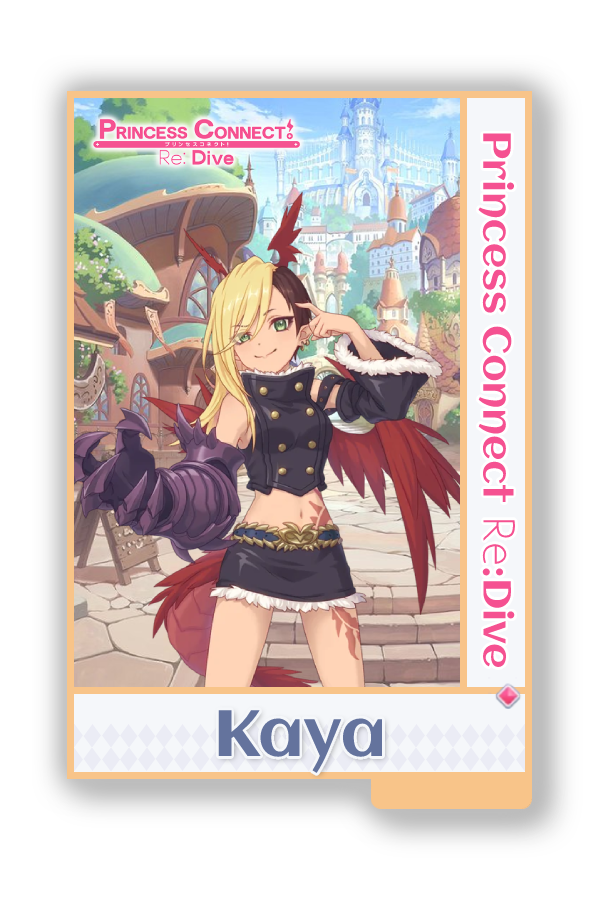
<style>
.page{position:relative;width:600px;height:900px;background:#ffffff}
.page>*{position:absolute;margin:0}
.t1{font:39px "Aclonica-Regular";color:#f55191}
.t2{font:39px "AaarghNormal";color:#f55191}
.t3{font:65px "Aclonica-Regular";color:#64739d}
</style>
<div class="page">
<p class="t1" style="left:478px;top:133px;width:38px;height:534px;rotate:90deg">Princess Connect <span class="t2">Re</span>:Dive</p>
<p class="t3" style="left:218px;top:710px;width:164px;height:63px">Kaya</p>
</div>
